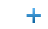
<style>
.page{position:relative;width:48px;height:29px;background:#ffffff}
.page>*{position:absolute;margin:0}
.t1{font:29.7px "ArialMT";color:#368dca}
</style>
<div class="page">
<p class="t1" style="left:26px;top:8px;width:15px;height:15px">+</p>
</div>
